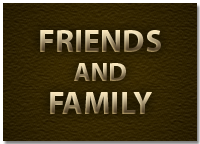
<style>
.page{position:relative;width:200px;height:144px}
.page>*{position:absolute;margin:0}
.t1{font:32px "MyriadPro-Bold"}
.t2{font:26px "MyriadPro-Bold"}
</style>
<div class="page">
<p class="t1" style="left:40px;top:30px;width:121px;height:22px">FRIENDS</p>
<p class="t2" style="left:74px;top:63px;width:52px;height:18px">AND</p>
<p class="t1" style="left:50px;top:92px;width:102px;height:22px">FAMILY</p>
</div>
